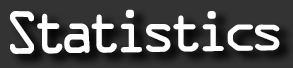
<style>
.page{position:relative;width:293px;height:68px;background:#333333}
.page>*{position:absolute;margin:0}
.t1{font:60px "OCRAExtended";letter-spacing:-0.15em;color:#ffffff}
</style>
<div class="page">
<p class="t1" style="left:9px;top:9px;width:271px;height:45px">Statistics</p>
</div>
